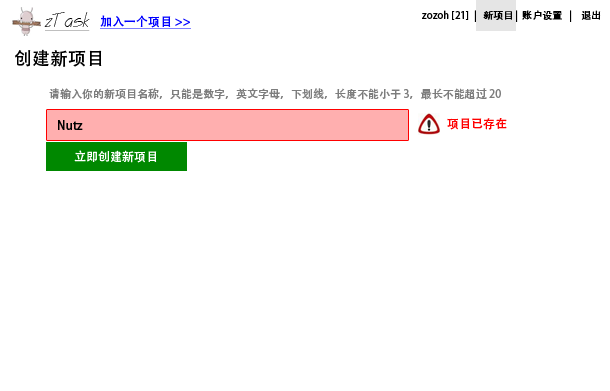
<style>
.page{position:relative;width:610px;height:391px;background:#ffffff}
.page>*{position:absolute;margin:0}
.t1{font:18px "757-CAI978";color:#000000;text-decoration:underline}
.t2{font:12px "AdobeHeitiStd-Regular";color:#0000ff;text-decoration:underline}
.t3{font:10px "AdobeHeitiStd-Regular";color:#000000}
.t4{font:18px "AdobeHeitiStd-Regular";color:#000000}
.t5{font:11px "AdobeHeitiStd-Regular";color:#7d7d7d}
.t6{font:12px "AdobeHeitiStd-Regular";color:#000000}
.t7{font:12px "AdobeHeitiStd-Regular";color:#ff0000}
.t8{font:12px "AdobeHeitiStd-Regular";color:#ffffff}
</style>
<div class="page">
<p class="t1" style="left:44px;top:12px;width:46px;height:19px">zTask</p>
<p class="t2" style="left:100px;top:15px;width:91px;height:14px">加入一个项目 &gt;&gt;</p>
<p class="t3" style="left:422px;top:10px;width:179px;height:12px">zozoh [21]  |   新项目 |  账户设置   |    退出</p>
<p class="t4" style="left:15px;top:49px;width:87px;height:18px">创建新项目</p>
<p class="t5" style="left:49px;top:88px;width:452px;height:12px">请输入你的新项目名称，只能是数字，英文字母，下划线，长度不能小于 3，最长不能超过 20</p>
<p class="t6" style="left:58px;top:120px;width:25px;height:10px">Nutz</p>
<p class="t7" style="left:447px;top:118px;width:60px;height:12px">项目已存在</p>
<p class="t8" style="left:74px;top:150px;width:83px;height:13px">立即创建新项目</p>
</div>
